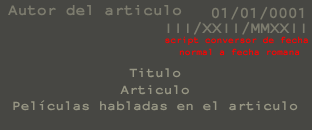
<style>
.page{position:relative;width:312px;height:130px;background:#474743}
.page>*{position:absolute;margin:0}
.t1{font:16.1px "NotCourierSans-Bold";color:#7d7c6e}
.t2{font:10px "NotCourierSans-Bold";color:#ff0000;scale:0.96 1}
.t3{font:14px "NotCourierSans-Bold";color:#979684;scale:1.03 1}
</style>
<div class="page">
<p class="t1" style="left:8px;top:5px;width:174px;height:11px">Autor del articulo</p>
<p class="t1" style="left:211px;top:6px;width:93px;height:14px">01/01/0001</p>
<p class="t2" style="left:165px;top:36px;width:143px;height:20px;text-align:center">script conversor de fecha <br>normal a fecha romana</p>
<p class="t3" style="left:13px;top:68px;width:285px;height:43px;text-align:center">Titulo<br>Articulo<br>Películas habladas en el articulo</p>
</div>
